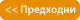
<style>
.page{position:relative;width:80px;height:20px;background:#e68d00}
.page>*{position:absolute;margin:0}
.t1{font:11px "MyriadPro-Semibold";color:#ffffff}
</style>
<div class="page">
<p class="t1" style="left:5px;top:5px;width:71px;height:11px">&lt;&lt; Прeдходни</p>
</div>
